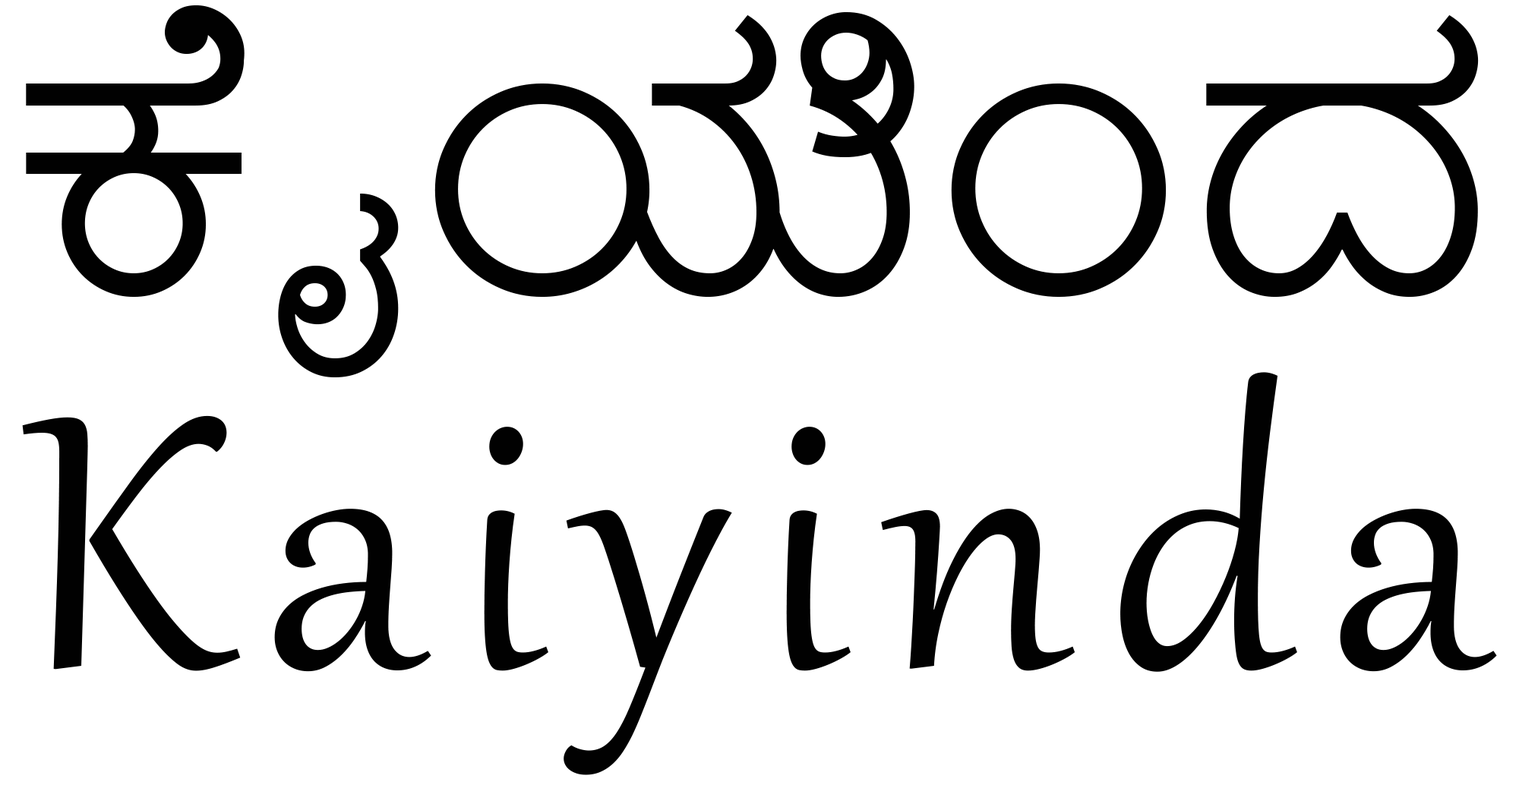
<style>
.page{position:relative;width:1519px;height:785px;background:#ffffff}
.page>*{position:absolute;margin:0}
.t1{font:443px "Gabriola";letter-spacing:0.08em;color:#010101}
.t2{font:348px "NirmalaUI";color:#010101}
</style>
<div class="page">
<p class="t1" style="left:22px;top:5px;width:1475px;height:770px;text-align:center"><span class="t2">ಕೈಯಿಂದ<br></span>Kaiyinda</p>
</div>
